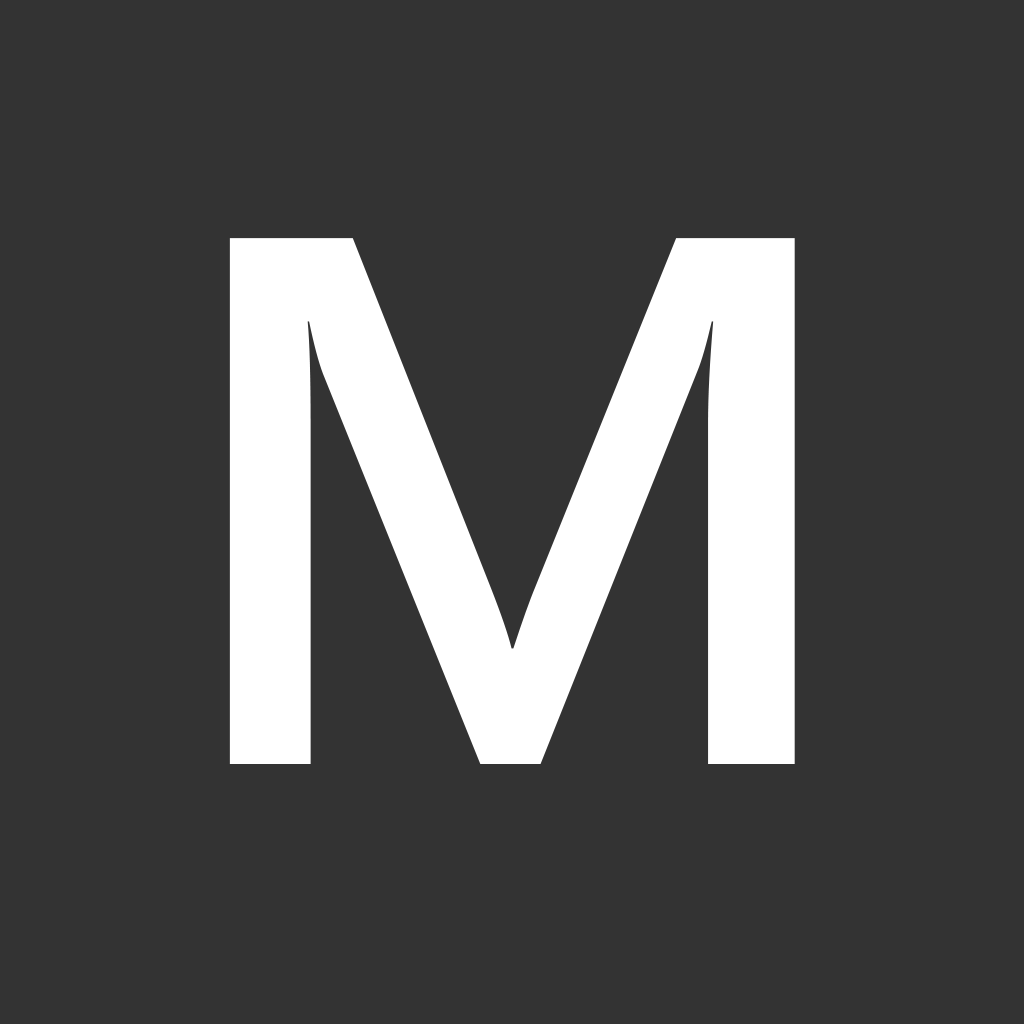
<style>
.page{position:relative;width:1024px;height:1024px;background:#333333}
.page>*{position:absolute;margin:0}
.t1{font:750.8px "SegoeUI-Semibold";letter-spacing:0.004em;color:#ffffff}
</style>
<div class="page">
<p class="t1" style="left:229px;top:238px;width:566px;height:526px">M</p>
</div>
